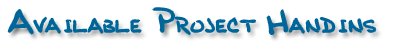
<style>
.page{position:relative;width:400px;height:45px;background:#ffffff}
.page>*{position:absolute;margin:0}
.t1{font:18px "BobbiesHand";color:#006699}
.t2{font:30px "BobbiesHand";color:#006699}
</style>
<div class="page">
<p class="t1" style="left:8px;top:8px;width:368px;height:27px"><span class="t2">A</span>VAILABLE <span class="t2">P</span>ROJECT <span class="t2">H</span>ANDINS</p>
</div>
